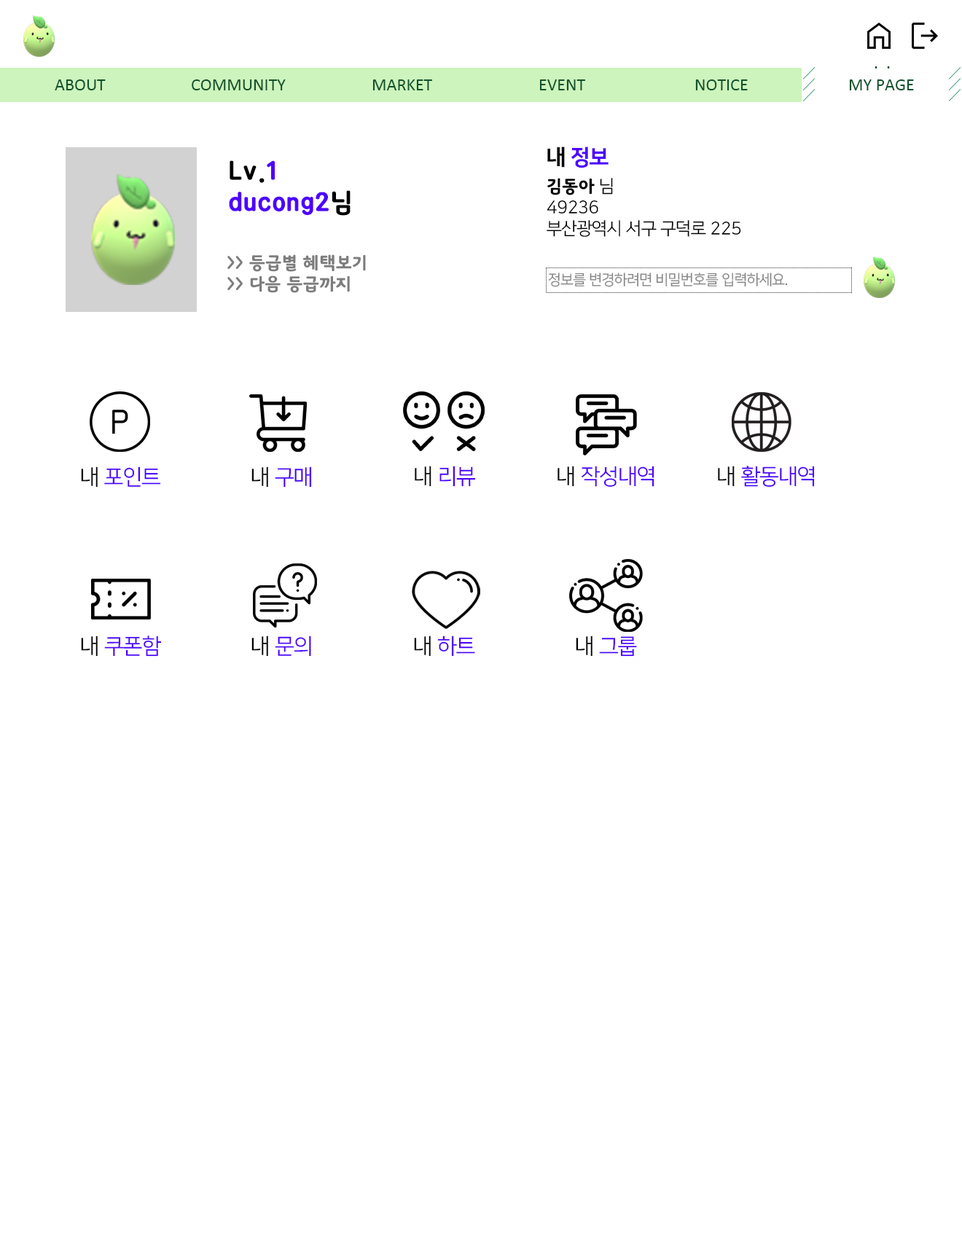
<style>
.page{position:relative;width:962px;height:1239px;background:#ffffff}
.page>*{position:absolute;margin:0}
.t1{font:17.5px "Calibri";color:#11532e}
.t2{font:17.5px "Calibri";color:#12522e}
.t3{font:21.9px "NanumSquare_acEB";color:#4e00ff}
.t4{font:21.9px "NanumSquare_acEB";color:#000000}
.t5{font:26.2px "KoreanSST-R";color:#4e00ff}
.t6{font:26.2px "KoreanSST-R";color:#000000}
.t7{font:17.5px "NanumSquare_acR";color:#000000}
.t8{font:17.5px "KoreanSST-R";color:#000000}
.t9{font:17.5px "KoreanSST-R";color:#7d7d7d}
.t10{font:14.6px "NanumSquare_acR";color:#868686}
.t11{font:21.9px "NanumSquare_acR";color:#4e00ff}
.t12{font:21.9px "NanumSquare_acR";color:#090808}
.t13{font:21.9px "NanumSquare_acR";color:#000000}
.t14{font:21.9px "NanumSquare_acR";color:#020202}
.t15{font:21.9px "NanumSquare_acR";color:#010101}
</style>
<div class="page">
<p class="t1" style="left:55px;top:79px;width:51px;height:11px">ABOUT</p>
<p class="t2" style="left:192px;top:79px;width:94px;height:11px">COMMUNITY</p>
<p class="t2" style="left:373px;top:79px;width:59px;height:11px">MARKET</p>
<p class="t2" style="left:539px;top:79px;width:46px;height:11px">EVENT</p>
<p class="t2" style="left:695px;top:79px;width:53px;height:11px">NOTICE</p>
<p class="t2" style="left:849px;top:79px;width:65px;height:11px">MY PAGE</p>
<p class="t3" style="left:547px;top:147px;width:62px;height:21px"><span class="t4">내 </span>정보</p>
<p class="t5" style="left:229px;top:160px;width:122px;height:56px"><span class="t6">Lv.</span>1<br>ducong2<span class="t6">님</span></p>
<p class="t7" style="left:547px;top:178px;width:194px;height:59px"><span class="t8">김동아</span> 님<br>49236<br>부산광역시 서구 구덕로 225</p>
<p class="t9" style="left:227px;top:254px;width:139px;height:39px">&gt;&gt; 등급별 혜택보기<br>&gt;&gt; 다음 등급까지</p>
<p class="t10" style="left:548px;top:273px;width:240px;height:14px">정보를 변경하려면 비밀번호를 입력하세요.</p>
<p class="t11" style="left:81px;top:467px;width:80px;height:21px"><span class="t12">내 </span>포인트</p>
<p class="t11" style="left:251px;top:467px;width:61px;height:21px"><span class="t12">내 </span>구매</p>
<p class="t11" style="left:415px;top:466px;width:61px;height:21px"><span class="t12">내 </span>리뷰</p>
<p class="t11" style="left:558px;top:466px;width:97px;height:21px"><span class="t13">내 </span>작성내역</p>
<p class="t11" style="left:718px;top:466px;width:97px;height:21px"><span class="t12">내 </span>활동내역</p>
<p class="t11" style="left:81px;top:636px;width:80px;height:21px"><span class="t14">내 </span>쿠폰함</p>
<p class="t11" style="left:251px;top:636px;width:60px;height:21px"><span class="t13">내</span> 문의</p>
<p class="t11" style="left:414px;top:636px;width:61px;height:21px"><span class="t13">내</span> 하트</p>
<p class="t11" style="left:576px;top:636px;width:61px;height:21px"><span class="t15">내 </span>그룹</p>
</div>
